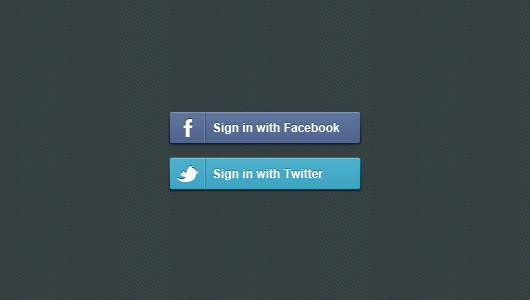
<style>
.page{position:relative;width:530px;height:300px}
.page>*{position:absolute;margin:0}
.t1{font:12px "Arial-BoldMT";color:#ffffff}
</style>
<div class="page">
<p class="t1" style="left:213px;top:123px;width:127px;height:11px">Sign in with Facebook</p>
<p class="t1" style="left:213px;top:169px;width:110px;height:11px">Sign in with Twitter</p>
</div>
